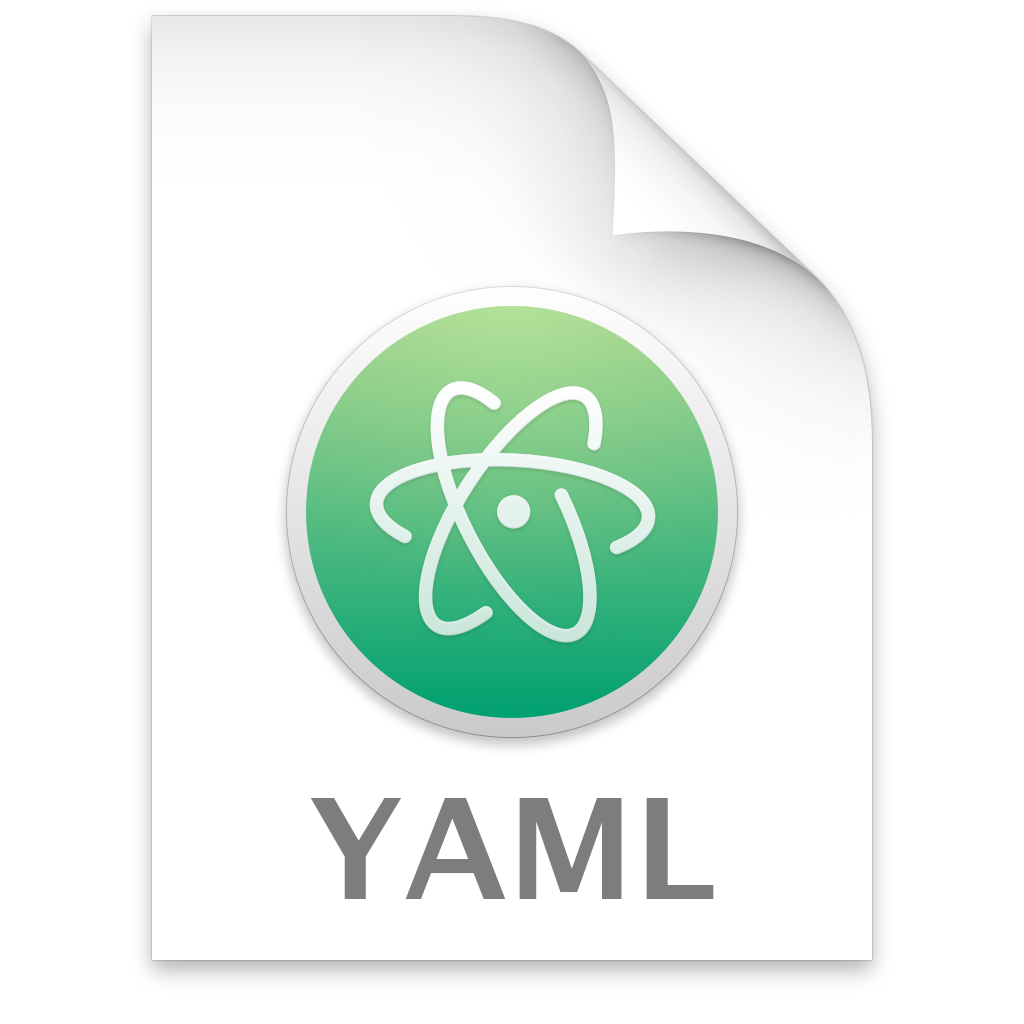
<style>
.page{position:relative;width:1024px;height:1024px;background:#ffffff}
.page>*{position:absolute;margin:0}
.t1{font:140px "LucidaGrande-Bold";color:#7d7d7d}
</style>
<div class="page">
<p class="t1" style="left:310px;top:798px;width:404px;height:101px">YAML</p>
</div>
